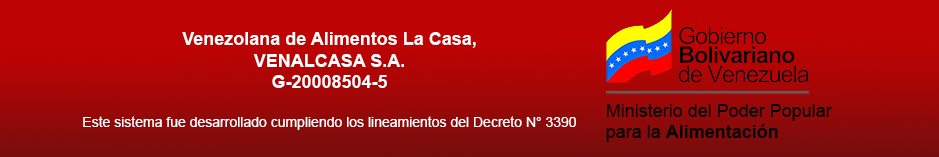
<style>
.page{position:relative;width:939px;height:157px;background:#bd0303}
.page>*{position:absolute;margin:0}
.t1{font:14px "ArialMT";color:#ffffff}
.t2{font:18px "Arial-BoldMT";color:#ffffff}
.t3{font:18px "ArialMT";color:#000000}
.t4{font:18px "Arial-BoldMT";color:#000000}
</style>
<div class="page">
<p class="t1" style="left:83px;top:32px;width:493px;height:98px;text-align:center"><span class="t2">Venezolana de Alimentos La Casa,<br>VENALCASA S.A.<br>G-20008504-5<br><br></span>Este sistema fue desarrollado cumpliendo los lineamientos del Decreto N° 3390</p>
<p class="t3" style="left:606px;top:104px;width:226px;height:38px">Ministerio del Poder Popular<br>para la <span class="t4">Alimentación</span></p>
</div>
